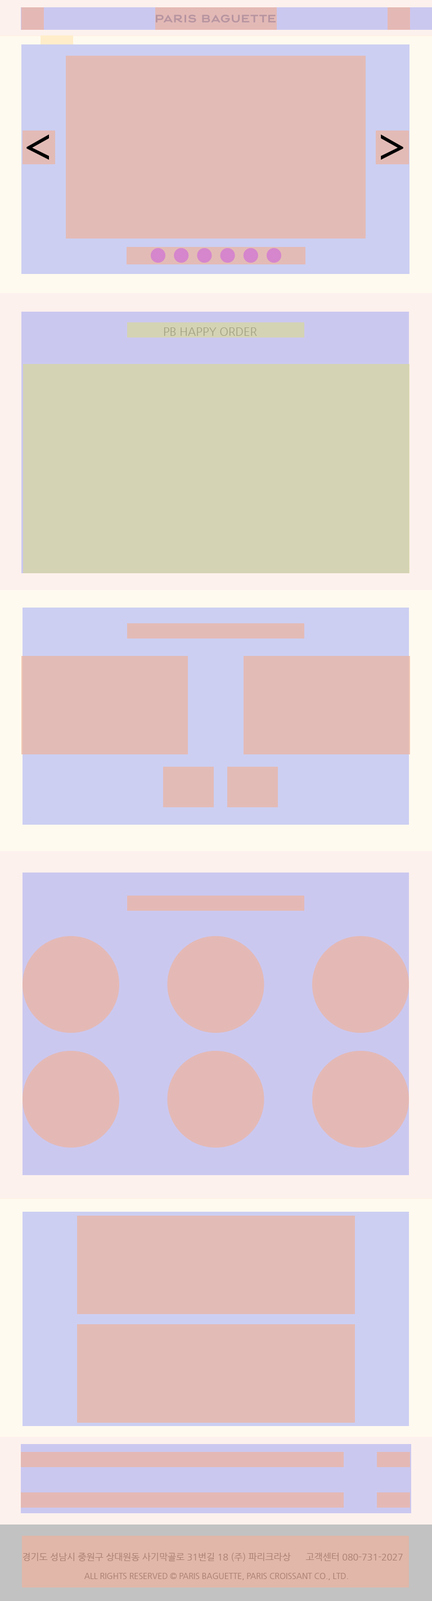
<style>
.page{position:relative;width:432px;height:1601px;background:#e3bbb6}
.page>*{position:absolute;margin:0}
.t1{font:11.2px "NanumGothic";color:#a3a383}
.t2{font:9px "NanumGothic";color:#ab8273}
.t3{font:7.9px "NanumGothic";color:#ab8273}
</style>
<div class="page">
<p class="t1" style="left:164px;top:327px;width:93px;height:9px">PB HAPPY ORDER</p>
<p class="t2" style="left:22px;top:1552px;width:381px;height:10px">경기도 성남시 중원구 상대원동 사기막골로 31번길 18 (주) 파리크라상      고객센터 080-731-2027</p>
<p class="t3" style="left:84px;top:1573px;width:264px;height:7px">ALL RIGHTS RESERVED © PARIS BAGUETTE, PARIS CROISSANT CO., LTD.</p>
</div>
